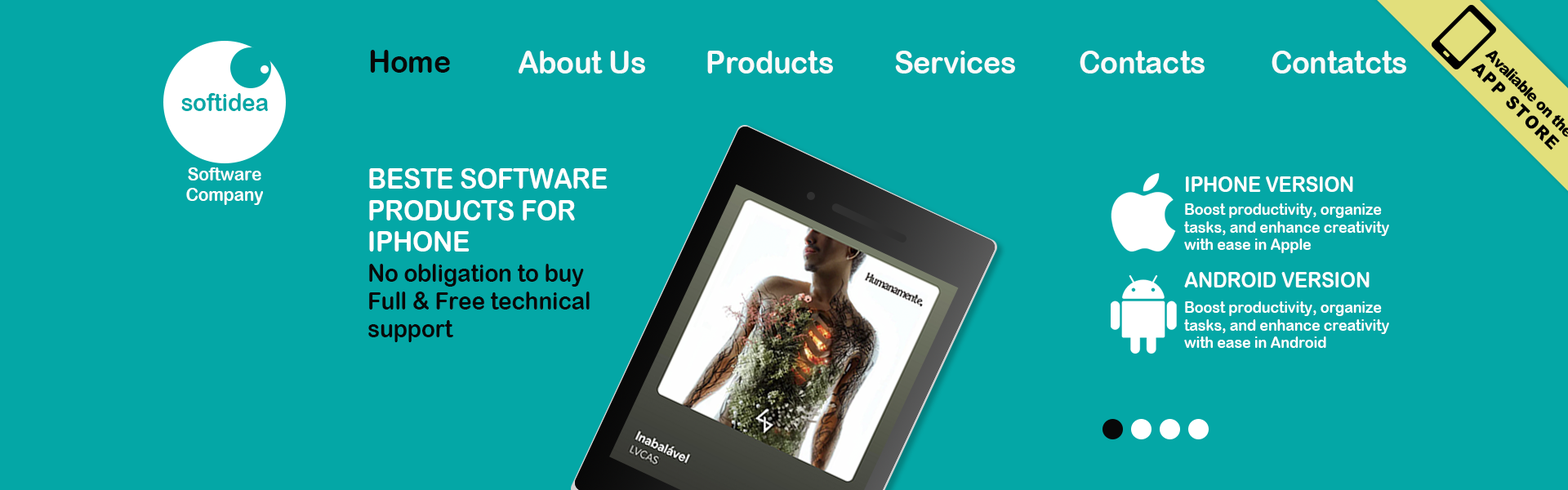
<style>
.page{position:relative;width:1568px;height:490px;background:#04a7a6}
.page>*{position:absolute;margin:0}
.t1{font:31.8px "ArialRoundedMTBold";letter-spacing:-0.01em;color:#080808;scale:0.93 1}
.t2{font:31.8px "ArialRoundedMTBold";letter-spacing:-0.01em;color:#fafafa;scale:0.93 1}
.t3{font:24.7px "ArialRoundedMTBold";letter-spacing:-0.01em;color:#04a7a6;scale:0.93 1}
.t4{font:18.5px "ArialRoundedMTBold";letter-spacing:-0.01em;color:#ffffff;scale:0.93 1}
.t5{font:28.2px "ArialRoundedMTBold";letter-spacing:-0.01em;color:#ffffff;scale:0.93 1}
.t6{font:21.2px "ArialRoundedMTBold";letter-spacing:-0.01em;color:#ffffff;scale:0.93 1}
.t7{font:15.9px "ArialRoundedMTBold";letter-spacing:-0.01em;color:#ffffff;scale:0.93 1}
.t8{font:24.7px "ArialRoundedMTBold";letter-spacing:-0.01em;color:#080808;scale:0.93 1}
</style>
<div class="page">
<p class="t1" style="left:370px;top:50px;width:80px;height:23px">Home</p>
<p class="t2" style="left:519px;top:51px;width:126px;height:23px">About Us</p>
<p class="t2" style="left:707px;top:51px;width:126px;height:23px">Products</p>
<p class="t2" style="left:895px;top:51px;width:120px;height:23px">Services</p>
<p class="t2" style="left:1080px;top:51px;width:125px;height:23px">Contacts</p>
<p class="t2" style="left:1272px;top:51px;width:134px;height:23px">Contatcts</p>
<p class="t3" style="left:181px;top:93px;width:87px;height:18px">softidea</p>
<p class="t4" style="left:186px;top:167px;width:77px;height:38px;text-align:center">Software<br>Company</p>
<p class="t5" style="left:369px;top:168px;width:239px;height:84px">BESTE SOFTWARE<br>PRODUCTS FOR<br>IPHONE</p>
<p class="t6" style="left:1186px;top:176px;width:167px;height:16px">IPHONE VERSION</p>
<p class="t7" style="left:1184px;top:203px;width:205px;height:50px">Boost productivity, organize tasks, and enhance creativity with ease in Apple</p>
<p class="t8" style="left:368px;top:264px;width:222px;height:78px">No obligation to buy<br>Full &amp; Free technical<br>support</p>
<p class="t6" style="left:1184px;top:272px;width:186px;height:15px">ANDROID VERSION</p>
<p class="t7" style="left:1184px;top:301px;width:205px;height:47px">Boost productivity, organize tasks, and enhance creativity with ease in Android</p>
</div>
